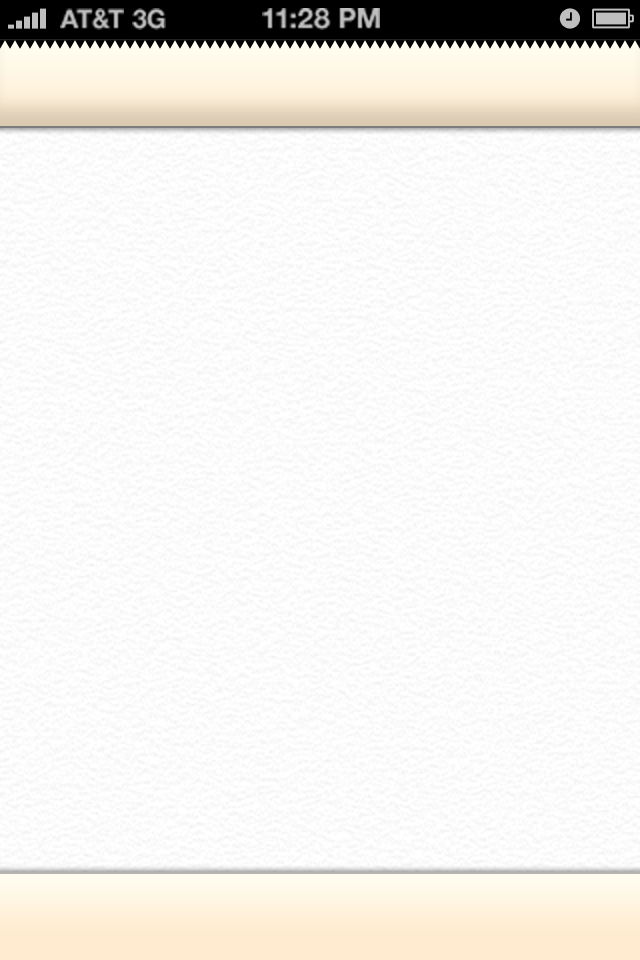
<style>
.page{position:relative;width:640px;height:960px}
.page>*{position:absolute;margin:0}
.t1{font:26px "HelveticaNeue-Bold";color:#bfbfbf;text-transform:uppercase}
.t2{font:28px "HelveticaNeue-Bold";color:#bfbfbf;text-transform:uppercase}
</style>
<div class="page">
<p class="t1" style="left:60px;top:8px;width:64px;height:22px">AT&amp;T</p>
<p class="t1" style="left:132px;top:8px;width:34px;height:22px">3G</p>
<p class="t2" style="left:262px;top:8px;width:118px;height:22px">11:28 PM</p>
</div>
